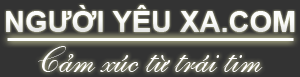
<style>
.page{position:relative;width:300px;height:77px;background:#333333}
.page>*{position:absolute;margin:0}
.t1{font:29px "Arial-BoldMT";color:#fbfcfb}
.t2{font:36px "UVNKeChuyen1";color:#fefdfe}
</style>
<div class="page">
<p class="t1" style="left:6px;top:5px;width:289px;height:27px">NGƯỜI YÊU XA.COM</p>
<p class="t2" style="left:38px;top:46px;width:225px;height:26px">Cảm xúc từ trái tim</p>
</div>
